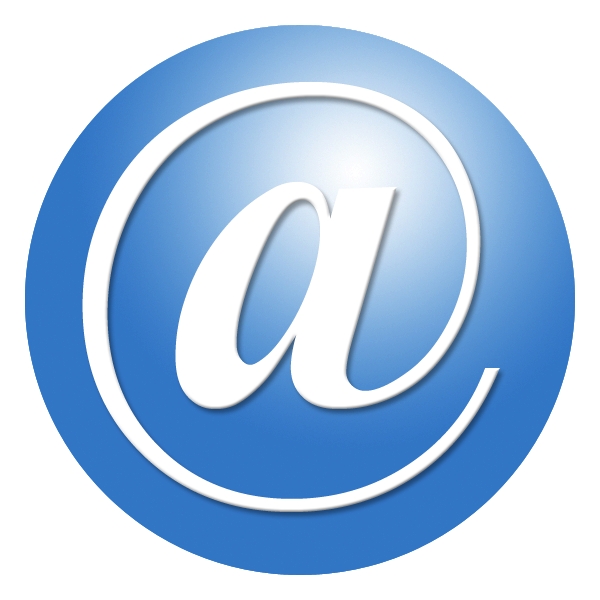
<style>
.page{position:relative;width:600px;height:600px;background:#ffffff}
.page>*{position:absolute;margin:0}
.t1{font:829.2px "TimesNewRomanPS-BoldMT";letter-spacing:-0.01em;color:#ffffff}
</style>
<div class="page">
<p class="t1" style="left:82px;top:81px;width:418px;height:431px">@</p>
</div>
